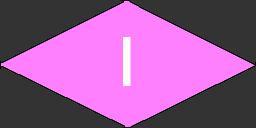
<style>
.page{position:relative;width:256px;height:128px;background:#333333}
.page>*{position:absolute;margin:0}
.t1{font:64px "AdobeHeitiStd-Regular";color:#ffffff}
</style>
<div class="page">
<p class="t1" style="left:123px;top:37px;width:8px;height:49px">I</p>
</div>
